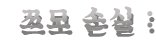
<style>
.page{position:relative;width:156px;height:40px;background:#ffffff}
.page>*{position:absolute;margin:0}
.t1{font:26.9px "SDKukdetopokki-bBd";letter-spacing:0.08em;color:#9f9c9c}
</style>
<div class="page">
<p class="t1" style="left:19px;top:6px;width:134px;height:25px">쯔모 손실 :</p>
</div>
